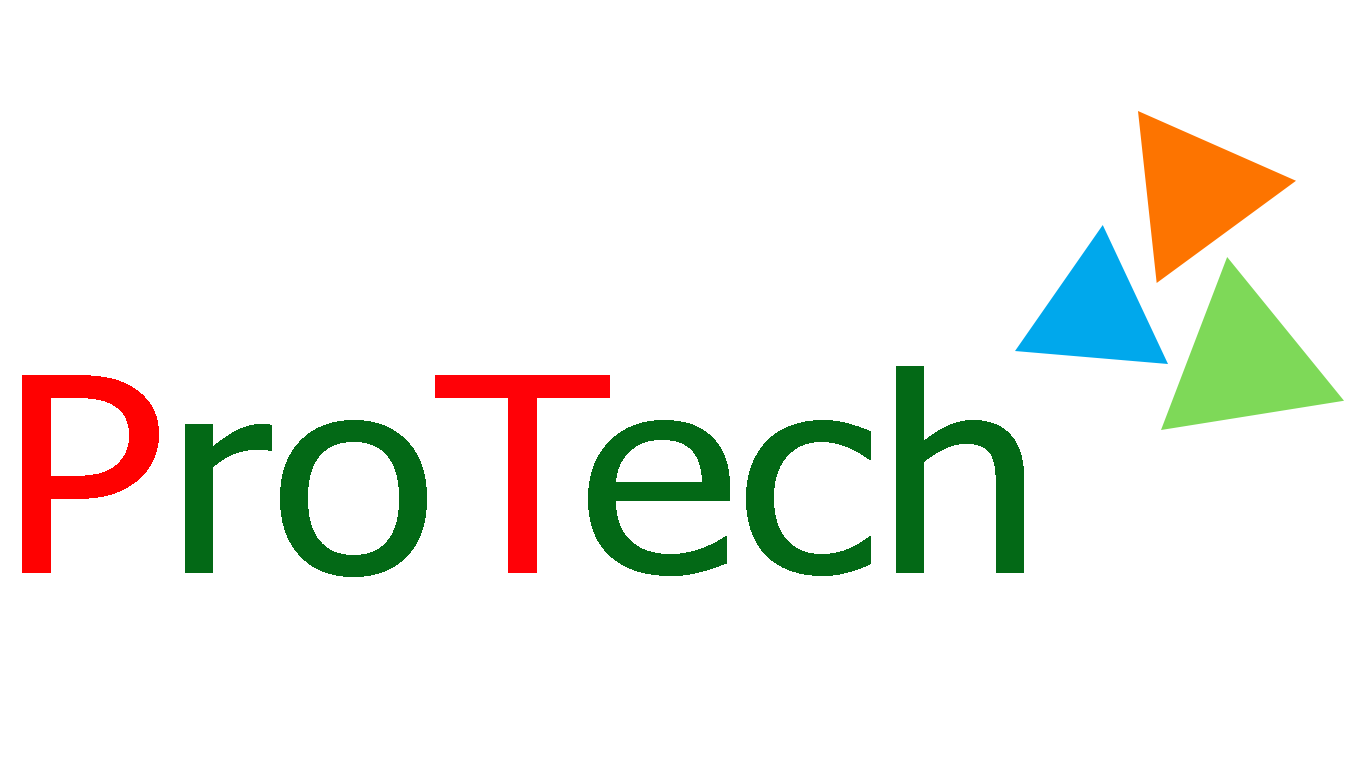
<style>
.page{position:relative;width:1366px;height:768px;background:#ffffff}
.page>*{position:absolute;margin:0}
.t1{font:272.8px "Tahoma";color:#036916;scale:1.1 1}
.t2{font:272.8px "Tahoma";color:#ff0101;scale:1.1 1}
.t3{font:272.8px "Tahoma";color:#ff0107;scale:1.1 1}
</style>
<div class="page">
<p class="t1" style="left:22px;top:366px;width:1002px;height:211px"><span class="t2">P</span>ro<span class="t3">T</span>ech</p>
</div>
